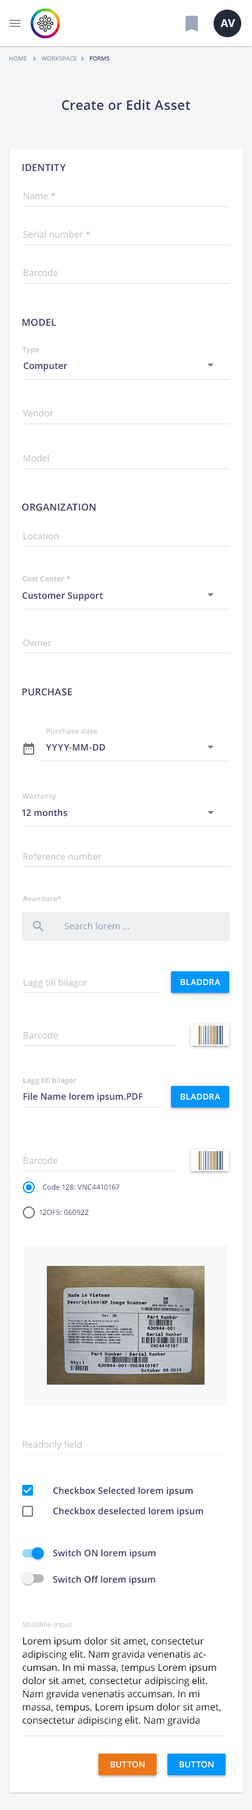
<style>
.page{position:relative;width:252px;height:1810px;background:#ffffff}
.page>*{position:absolute;margin:0}
.t1{font:10.8px "OpenSans-Bold";color:#ffffff;text-transform:uppercase}
.t2{font:6px "OpenSans";color:#8898aa;text-transform:uppercase}
.t3{font:6px "OpenSans";color:#32325d;text-transform:uppercase}
.t4{font:13.2px "OpenSans-Semibold";letter-spacing:0.02em;color:#32325d}
.t5{font:9.6px "OpenSans-Semibold";letter-spacing:0.02em;color:#32325d}
.t6{font:9px "OpenSans";letter-spacing:0.01em;color:#bbbbbb}
.t7{font:7.2px "OpenSans-Semibold";letter-spacing:0.02em;color:#c2c2cb}
.t8{font:9px "OpenSans-Semibold";letter-spacing:0.01em;color:#32325d}
.t9{font:9px "OpenSans";letter-spacing:0.01em;color:#8898aa}
.t10{font:9.1px "OpenSans";letter-spacing:0.01em;color:#bbbbbb}
.t11{font:8.4px "OpenSans-Semibold";letter-spacing:0.01em;color:#ffffff;text-transform:uppercase}
.t12{font:7.2px "OpenSans-Semibold";letter-spacing:0.01em;color:#bbbbbb}
.t13{font:7.2px "OpenSans";letter-spacing:0.01em;color:#32325d}
.t14{font:7.2px "OpenSans";letter-spacing:0.01em;color:#bbbbbb}
.t15{font:9.6px/13.2px "OpenSans";color:#000000}
</style>
<div class="page">
<p class="t1" style="left:220px;top:19px;width:15px;height:8px">AV</p>
<p class="t2" style="left:9px;top:56px;width:18px;height:5px">Home</p>
<p class="t2" style="left:41px;top:56px;width:36px;height:5px">Workspace</p>
<p class="t3" style="left:89px;top:56px;width:21px;height:5px">Forms</p>
<p class="t4" style="left:62px;top:100px;width:128px;height:10px">Create or Edit Asset</p>
<p class="t5" style="left:22px;top:164px;width:44px;height:7px">IDENTITY</p>
<p class="t6" style="left:23px;top:192px;width:33px;height:8px">Name *</p>
<p class="t6" style="left:23px;top:230px;width:67px;height:8px">Serial number *</p>
<p class="t6" style="left:23px;top:269px;width:35px;height:8px">Barcode</p>
<p class="t5" style="left:22px;top:319px;width:34px;height:7px">MODEL</p>
<p class="t7" style="left:22px;top:347px;width:17px;height:7px">Type</p>
<p class="t8" style="left:23px;top:362px;width:44px;height:9px">Computer</p>
<p class="t6" style="left:23px;top:409px;width:30px;height:8px">Vendor</p>
<p class="t6" style="left:23px;top:454px;width:26px;height:8px">Model</p>
<p class="t5" style="left:22px;top:503px;width:73px;height:8px">ORGANIZATION</p>
<p class="t6" style="left:23px;top:533px;width:36px;height:7px">Location</p>
<p class="t7" style="left:22px;top:575px;width:48px;height:7px">Cost Center *</p>
<p class="t8" style="left:22px;top:592px;width:81px;height:9px">Customer Support</p>
<p class="t6" style="left:23px;top:640px;width:29px;height:7px">Owner</p>
<p class="t5" style="left:22px;top:688px;width:50px;height:8px">PURCHASE</p>
<p class="t7" style="left:46px;top:728px;width:51px;height:6px">Purchase date</p>
<p class="t8" style="left:46px;top:744px;width:59px;height:7px">YYYY-MM-DD</p>
<p class="t7" style="left:22px;top:793px;width:34px;height:7px">Warranty</p>
<p class="t8" style="left:22px;top:809px;width:45px;height:8px">12 months</p>
<p class="t6" style="left:23px;top:853px;width:79px;height:7px">Reference number</p>
<p class="t7" style="left:23px;top:896px;width:38px;height:5px">Avandare*</p>
<p class="t9" style="left:64px;top:922px;width:66px;height:8px">Search lorem ...</p>
<p class="t10" style="left:23px;top:979px;width:65px;height:9px">Lagg till bilagor</p>
<p class="t11" style="left:181px;top:979px;width:39px;height:6px">bladdra</p>
<p class="t10" style="left:23px;top:1031px;width:35px;height:8px">Barcode</p>
<p class="t12" style="left:23px;top:1078px;width:53px;height:7px">Lagg till bilagor</p>
<p class="t8" style="left:23px;top:1093px;width:120px;height:9px">File Name lorem ipsum.PDF</p>
<p class="t11" style="left:181px;top:1094px;width:39px;height:6px">bladdra</p>
<p class="t10" style="left:23px;top:1157px;width:35px;height:8px">Barcode</p>
<p class="t13" style="left:43px;top:1184px;width:76px;height:6px">Code 128: VNC4410167</p>
<p class="t13" style="left:40px;top:1210px;width:49px;height:6px">12OF5: 060922</p>
<p class="t6" style="left:23px;top:1441px;width:59px;height:9px">Readonly field</p>
<p class="t8" style="left:53px;top:1487px;width:140px;height:9px">Checkbox Selected lorem ipsum</p>
<p class="t8" style="left:53px;top:1507px;width:150px;height:10px">Checkbox deselected lorem ipsum</p>
<p class="t8" style="left:53px;top:1549px;width:102px;height:10px">Switch ON lorem ipsum</p>
<p class="t8" style="left:53px;top:1576px;width:102px;height:9px">Switch Off lorem ipsum</p>
<p class="t14" style="left:23px;top:1622px;width:49px;height:7px">Multiline Input</p>
<p class="t15" style="left:22px;top:1637px;width:199px;height:89px">Lorem ipsum dolor sit amet, consectetur adipiscing elit. Nam gravida venenatis accumsan. In mi massa, tempus Lorem ipsum dolor sit amet, consectetur adipiscing elit. Nam gravida venenatis accumsan. In mi massa, tempus, Lorem ipsum dolor sit amet, consectetur adipiscing elit. Nam gravida venenatis accumsan.</p>
<p class="t11" style="left:110px;top:1761px;width:35px;height:7px">button</p>
<p class="t11" style="left:179px;top:1761px;width:35px;height:7px">button</p>
</div>
